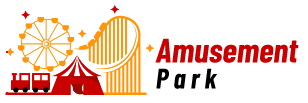
<style>
.page{position:relative;width:308px;height:103px;background:#ffffff}
.page>*{position:absolute;margin:0}
.t1{font:34px/26px "BarlowCondensed-BoldItalic";color:#ca0000}
.t2{font:28px/26px "BarlowCondensed-BoldItalic";letter-spacing:0.18em;color:#000000}
</style>
<div class="page">
<p class="t1" style="left:155px;top:38px;width:144px;height:51px">Amusement<br><span class="t2">Park</span></p>
</div>
